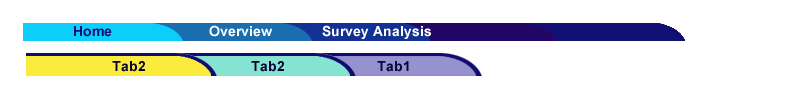
<style>
.page{position:relative;width:800px;height:89px;background:#ffffff}
.page>*{position:absolute;margin:0}
.t1{font:14px "Arial-BoldMT";color:#101074}
.t2{font:14px "Arial-BoldMT";color:#ffffff}
.t3{font:14px "Arial-BoldMT";color:#080634}
</style>
<div class="page">
<p class="t1" style="left:74px;top:26px;width:38px;height:11px">Home</p>
<p class="t2" style="left:209px;top:25px;width:64px;height:12px">Overview</p>
<p class="t2" style="left:322px;top:25px;width:109px;height:14px">Survey Analysis</p>
<p class="t3" style="left:112px;top:61px;width:33px;height:11px">Tab2</p>
<p class="t3" style="left:251px;top:61px;width:33px;height:11px">Tab2</p>
<p class="t3" style="left:377px;top:61px;width:32px;height:11px">Tab1</p>
</div>
